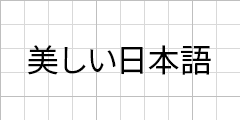
<style>
.page{position:relative;width:240px;height:120px;background:#ffffff}
.page>*{position:absolute;margin:0}
.t1{font:32px "NotoSansCJKjp-Regular";color:#000000}
</style>
<div class="page">
<p class="t1" style="left:28px;top:45px;width:183px;height:30px">美しい日本語</p>
</div>
